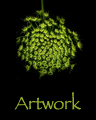
<style>
.page{position:relative;width:96px;height:120px;background:#000000}
.page>*{position:absolute;margin:0}
.t1{font:18px "Papyrus";color:#95ae2c}
</style>
<div class="page">
<p class="t1" style="left:14px;top:92px;width:67px;height:18px">Artwork</p>
</div>
